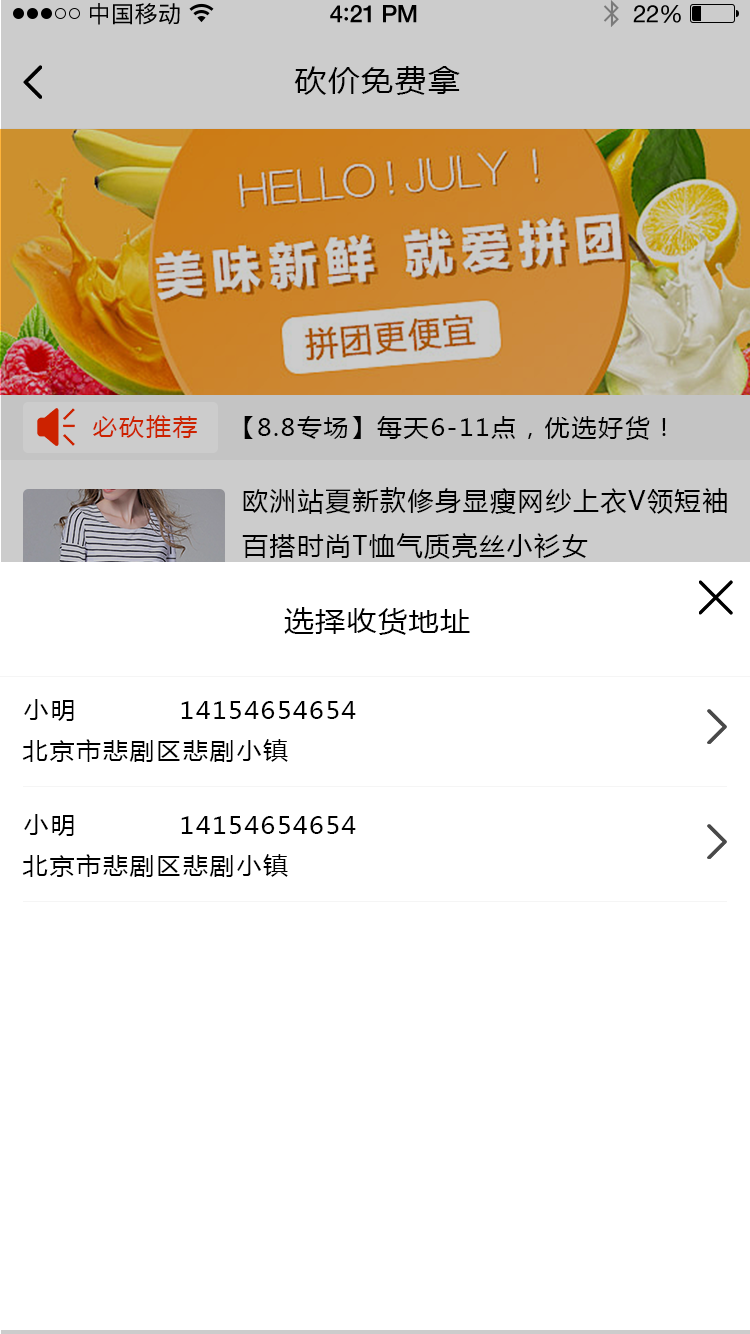
<style>
.page{position:relative;width:750px;height:1334px;background:#ffffff}
.page>*{position:absolute;margin:0}
.t1{font:23px "PingFangSC-Regular";letter-spacing:0.02em;color:#000000}
.t2{font:24px "HelveticaNeue-Medium";letter-spacing:-0.02em;color:#000000}
.t3{font:26px "Avenir-Medium";letter-spacing:-0.02em;color:#000000}
.t4{font:24px "HelveticaNeue";letter-spacing:-0.02em;color:#000000}
.t5{font:30px "MicrosoftYaHei";letter-spacing:0.05em;color:#000000;scale:1.06 1}
.t6{font:24px "MicrosoftYaHei";letter-spacing:0.05em;color:#cc2200;scale:1.06 1}
.t7{font:24px "MicrosoftYaHei";letter-spacing:0.05em;color:#000000;scale:1.06 1}
.t8{font:26px "MicrosoftYaHei";letter-spacing:0.06em;color:#000000;text-transform:uppercase}
.t9{font:28px "MicrosoftYaHei";letter-spacing:0.05em;color:#000000;scale:1.06 1}
</style>
<div class="page">
<p class="t1" style="left:90px;top:3px;width:90px;height:22px">中国移动</p>
<p class="t2" style="left:330px;top:5px;width:87px;height:18px">4<span class="t3">:</span>21 PM</p>
<p class="t4" style="left:633px;top:5px;width:48px;height:18px">22%</p>
<p class="t5" style="left:294px;top:66px;width:166px;height:29px">砍价免费拿</p>
<p class="t6" style="left:93px;top:415px;width:104px;height:23px">必砍推荐</p>
<p class="t7" style="left:244px;top:416px;width:422px;height:24px">【8.8专场】每天6-11点，优选好货！</p>
<p class="t8" style="left:242px;top:487px;width:485px;height:72px">欧洲站夏新款修身显瘦网纱上衣v领短袖百搭时尚t恤气质亮丝小衫女</p>
<p class="t9" style="left:284px;top:607px;width:186px;height:28px">选择收货地址</p>
<p class="t7" style="left:24px;top:699px;width:50px;height:22px">小明</p>
<p class="t7" style="left:181px;top:701px;width:175px;height:18px">14154654654</p>
<p class="t7" style="left:22px;top:739px;width:266px;height:23px">北京市悲剧区悲剧小镇</p>
<p class="t7" style="left:24px;top:814px;width:50px;height:22px">小明</p>
<p class="t7" style="left:181px;top:816px;width:175px;height:18px">14154654654</p>
<p class="t7" style="left:22px;top:854px;width:266px;height:23px">北京市悲剧区悲剧小镇</p>
</div>
